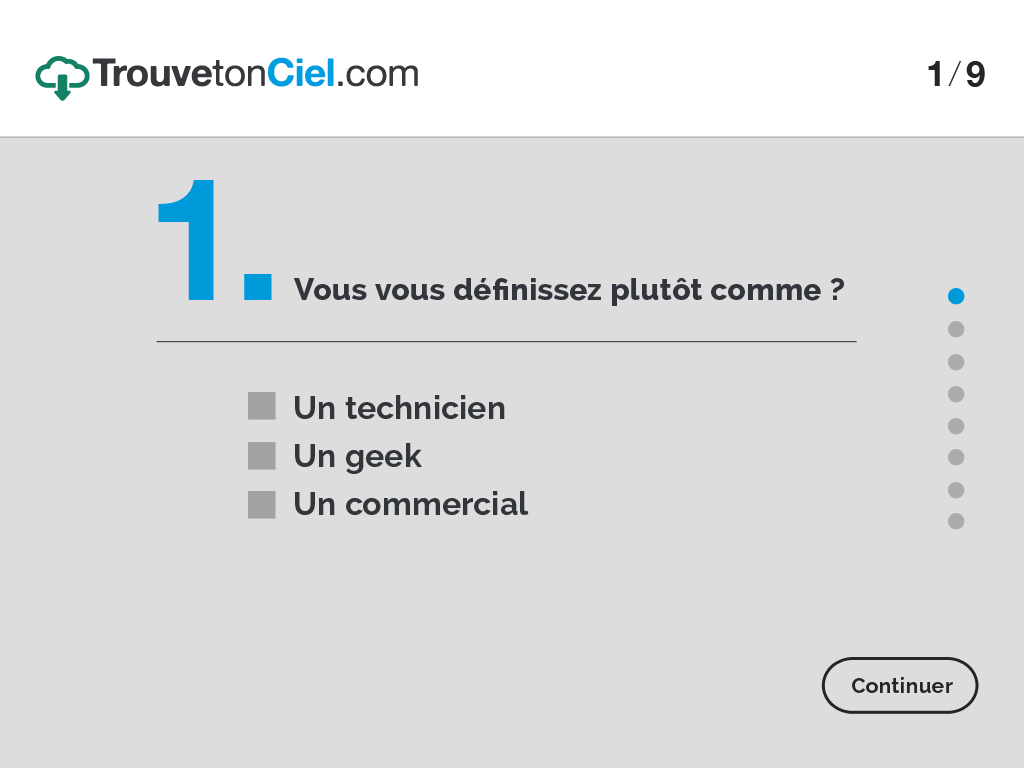
<style>
.page{position:relative;width:1024px;height:768px;background:#dddddd}
.page>*{position:absolute;margin:0}
.t1{font:35.2px "HelveticaNeue-Bold";letter-spacing:0.14em;color:#232629}
.t2{font:35.2px "HelveticaNeue-Thin";letter-spacing:0.16em;color:#232629}
.t3{font:172px "HelveticaNeue-Bold";letter-spacing:0.02em;color:#009ada}
.t4{font:30px "Raleway-ExtraBold";letter-spacing:0.02em;color:#32353b}
.t5{font:32px/48px "Raleway-Bold";letter-spacing:0.01em;color:#32363b}
.t6{font:21.2px "Raleway-Bold";letter-spacing:0.02em;color:#232629}
</style>
<div class="page">
<p class="t1" style="left:928px;top:61px;width:57px;height:26px">1<span class="t2">/</span>9</p>
<p class="t3" style="left:158px;top:180px;width:114px;height:120px">1.</p>
<p class="t4" style="left:294px;top:278px;width:550px;height:28px">Vous vous définissez plutôt comme ?</p>
<p class="t5" style="left:295px;top:395px;width:234px;height:120px">Un technicien<br>Un geek<br>Un commercial</p>
<p class="t6" style="left:852px;top:677px;width:101px;height:16px">Continuer</p>
</div>
